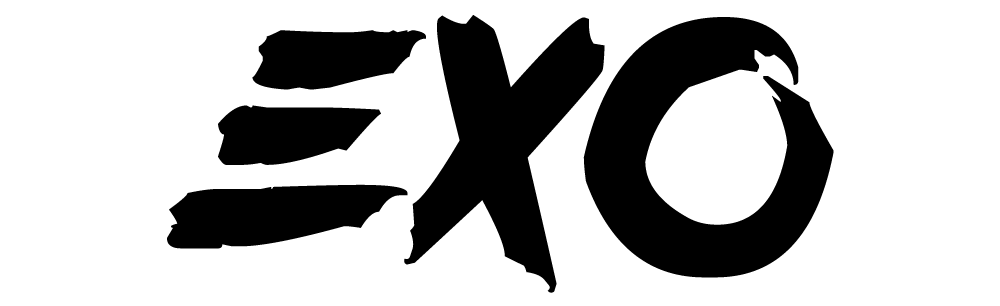
<style>
.page{position:relative;width:1000px;height:306px;background:#ffffff}
.page>*{position:absolute;margin:0}
.t1{font:600px "KillTheNoise";color:#000000}
</style>
<div class="page">
<p class="t1" style="left:167px;top:15px;width:667px;height:278px">EXO</p>
</div>
